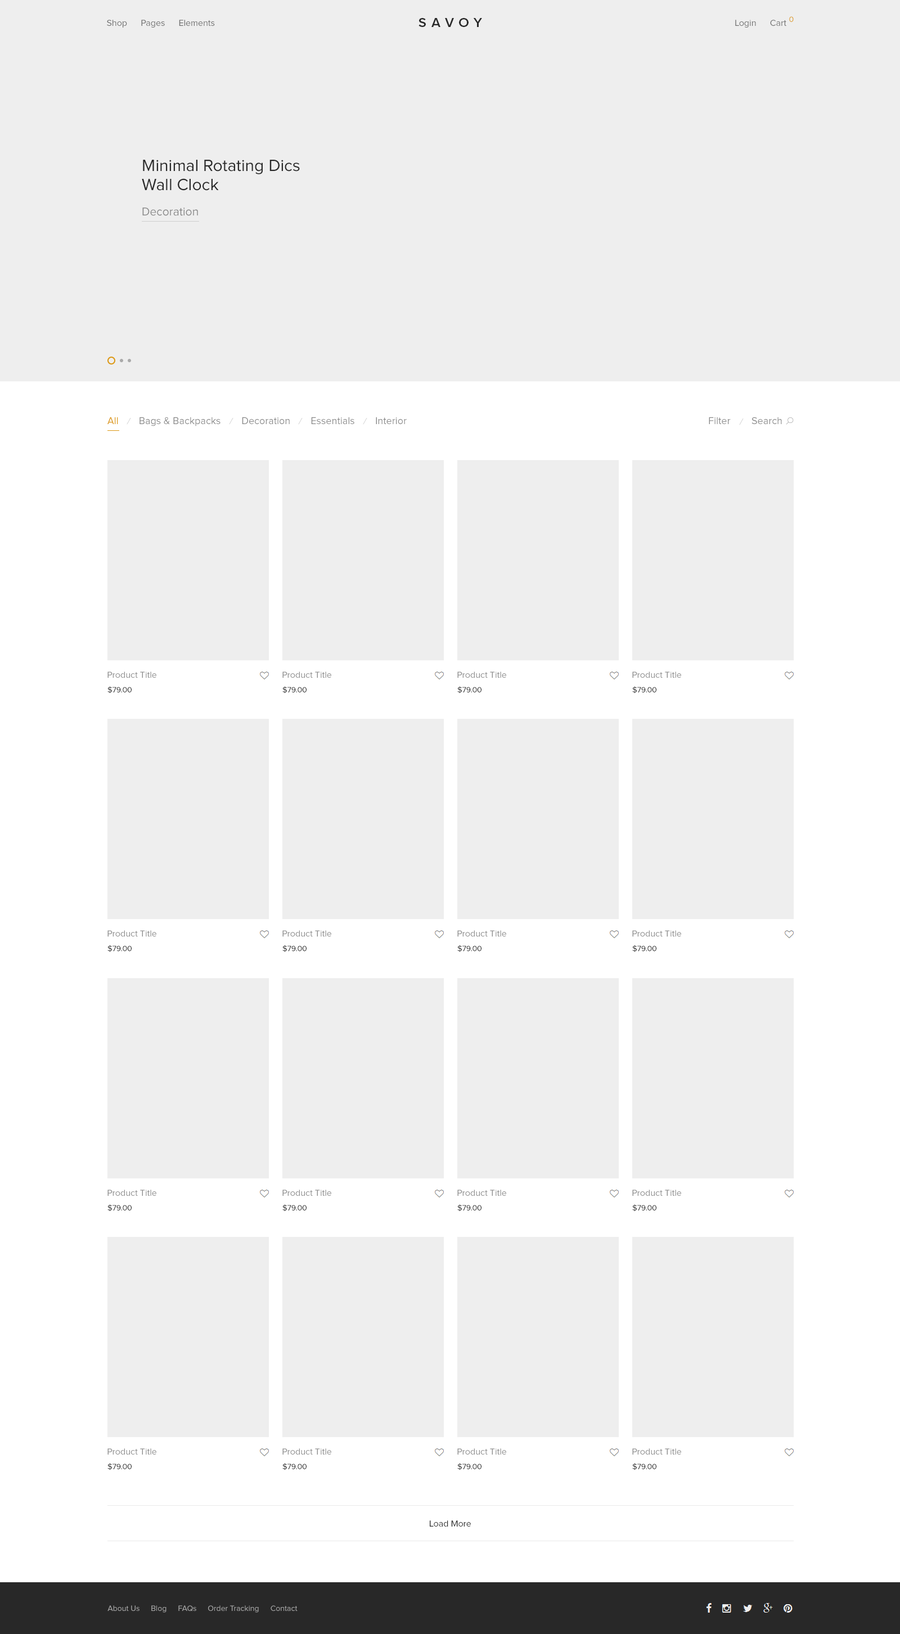
<style>
.page{position:relative;width:900px;height:1634px;background:#eeeeee}
.page>*{position:absolute;margin:0}
.t1{font:7.9px "ProximaNova-Regular";color:#dc9814}
.t2{font:9px "ProximaNova-Regular";color:#707070}
.t3{font:13.5px "ProximaNova-Semibold";letter-spacing:0.37em;color:#282828;text-transform:uppercase}
.t4{font:16.9px/19.1px "ProximaNova-Regular";color:#282828}
.t5{font:11.8px "ProximaNova-Regular";color:#888888}
.t6{font:10.1px "ProximaNova-Regular";color:#dc9814}
.t7{font:9px "ProximaNova-RegularIt";color:#cccccc}
.t8{font:10.1px "ProximaNova-Regular";color:#888888}
.t9{font:9px "ProximaNova-Regular";color:#8c8c8c}
.t10{font:7.9px "ProximaNova-Regular";color:#181818}
.t11{font:9px "ProximaNova-Regular";color:#282828}
.t12{font:7.9px "ProximaNova-Regular";color:#aaaaaa}
</style>
<div class="page">
<p class="t1" style="left:789px;top:16px;width:5px;height:6px">0</p>
<p class="t2" style="left:107px;top:20px;width:20px;height:8px">Shop</p>
<p class="t2" style="left:141px;top:20px;width:24px;height:8px">Pages</p>
<p class="t2" style="left:179px;top:20px;width:36px;height:6px">Elements</p>
<p class="t3" style="left:418px;top:18px;width:64px;height:9px">savoy</p>
<p class="t2" style="left:735px;top:20px;width:21px;height:8px">Login</p>
<p class="t2" style="left:770px;top:20px;width:16px;height:6px">Cart</p>
<p class="t4" style="left:142px;top:160px;width:158px;height:31px;text-align:right">Minimal Rotating Dics<br>Wall Clock</p>
<p class="t5" style="left:142px;top:208px;width:56px;height:8px">Decoration</p>
<p class="t6" style="left:107px;top:417px;width:11px;height:7px">All</p>
<p class="t7" style="left:127px;top:418px;width:4px;height:7px">/</p>
<p class="t8" style="left:140px;top:417px;width:80px;height:9px">Bags &amp; Backpacks</p>
<p class="t7" style="left:229px;top:418px;width:4px;height:7px">/</p>
<p class="t8" style="left:242px;top:417px;width:48px;height:7px">Decoration</p>
<p class="t7" style="left:298px;top:418px;width:5px;height:7px">/</p>
<p class="t8" style="left:311px;top:417px;width:43px;height:7px">Essentials</p>
<p class="t7" style="left:363px;top:418px;width:4px;height:7px">/</p>
<p class="t8" style="left:376px;top:417px;width:31px;height:7px">Interior</p>
<p class="t8" style="left:709px;top:417px;width:22px;height:7px">Filter</p>
<p class="t7" style="left:739px;top:418px;width:5px;height:7px">/</p>
<p class="t8" style="left:752px;top:417px;width:30px;height:7px">Search</p>
<p class="t9" style="left:107px;top:672px;width:49px;height:6px">Product Title</p>
<p class="t9" style="left:282px;top:672px;width:49px;height:6px">Product Title</p>
<p class="t9" style="left:457px;top:672px;width:49px;height:6px">Product Title</p>
<p class="t9" style="left:632px;top:672px;width:49px;height:6px">Product Title</p>
<p class="t10" style="left:107px;top:686px;width:25px;height:8px">$79.00</p>
<p class="t10" style="left:282px;top:686px;width:25px;height:8px">$79.00</p>
<p class="t10" style="left:457px;top:686px;width:25px;height:8px">$79.00</p>
<p class="t10" style="left:632px;top:686px;width:24px;height:8px">$79.00</p>
<p class="t9" style="left:107px;top:930px;width:49px;height:7px">Product Title</p>
<p class="t9" style="left:282px;top:930px;width:49px;height:7px">Product Title</p>
<p class="t9" style="left:457px;top:930px;width:49px;height:7px">Product Title</p>
<p class="t9" style="left:632px;top:930px;width:49px;height:7px">Product Title</p>
<p class="t10" style="left:107px;top:945px;width:25px;height:7px">$79.00</p>
<p class="t10" style="left:282px;top:945px;width:25px;height:7px">$79.00</p>
<p class="t10" style="left:457px;top:945px;width:25px;height:7px">$79.00</p>
<p class="t10" style="left:632px;top:945px;width:24px;height:7px">$79.00</p>
<p class="t9" style="left:107px;top:1190px;width:49px;height:6px">Product Title</p>
<p class="t9" style="left:282px;top:1190px;width:49px;height:6px">Product Title</p>
<p class="t9" style="left:457px;top:1190px;width:49px;height:6px">Product Title</p>
<p class="t9" style="left:632px;top:1190px;width:49px;height:6px">Product Title</p>
<p class="t10" style="left:107px;top:1204px;width:25px;height:8px">$79.00</p>
<p class="t10" style="left:282px;top:1204px;width:25px;height:8px">$79.00</p>
<p class="t10" style="left:457px;top:1204px;width:25px;height:8px">$79.00</p>
<p class="t10" style="left:632px;top:1204px;width:24px;height:8px">$79.00</p>
<p class="t9" style="left:107px;top:1448px;width:49px;height:7px">Product Title</p>
<p class="t9" style="left:282px;top:1448px;width:49px;height:7px">Product Title</p>
<p class="t9" style="left:457px;top:1448px;width:49px;height:7px">Product Title</p>
<p class="t9" style="left:632px;top:1448px;width:49px;height:7px">Product Title</p>
<p class="t10" style="left:107px;top:1463px;width:25px;height:7px">$79.00</p>
<p class="t10" style="left:282px;top:1463px;width:25px;height:7px">$79.00</p>
<p class="t10" style="left:457px;top:1463px;width:25px;height:7px">$79.00</p>
<p class="t10" style="left:632px;top:1463px;width:24px;height:7px">$79.00</p>
<p class="t11" style="left:430px;top:1520px;width:41px;height:7px">Load More</p>
<p class="t12" style="left:107px;top:1605px;width:33px;height:6px">About Us</p>
<p class="t12" style="left:151px;top:1605px;width:15px;height:8px">Blog</p>
<p class="t12" style="left:178px;top:1605px;width:18px;height:7px">FAQs</p>
<p class="t12" style="left:208px;top:1605px;width:51px;height:8px">Order Tracking</p>
<p class="t12" style="left:271px;top:1605px;width:27px;height:6px">Contact</p>
</div>
